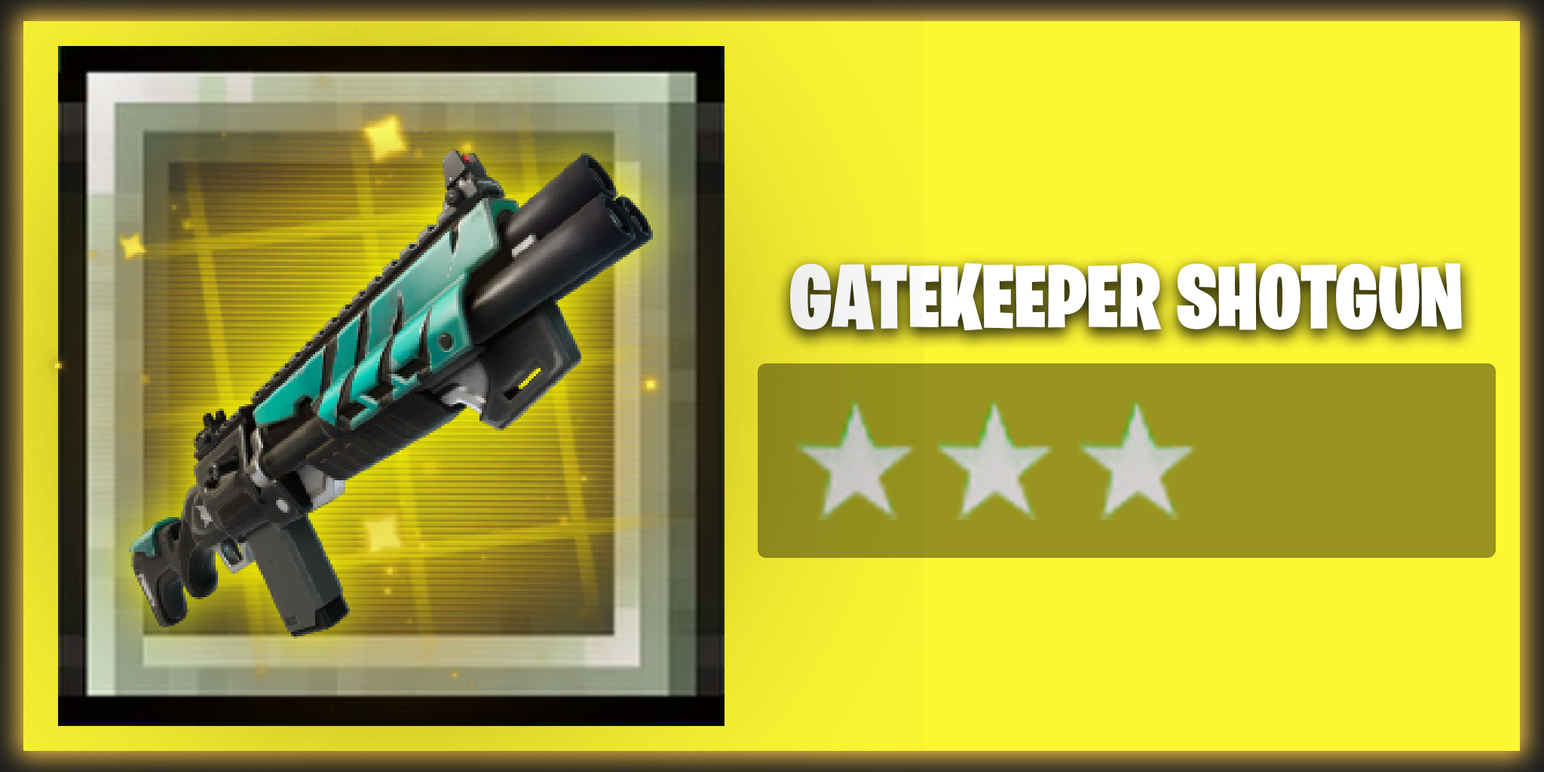
<style>
.page{position:relative;width:1544px;height:772px;background:#fdf633}
.page>*{position:absolute;margin:0}
.t1{font:90.5px "BurbankBigCondensed-Black";color:#ffffff}
</style>
<div class="page">
<p class="t1" style="left:790px;top:263px;width:672px;height:68px">GATEKEEPER SHOTGUN</p>
</div>
